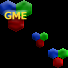
<style>
.page{position:relative;width:68px;height:68px;background:#000000}
.page>*{position:absolute;margin:0}
.t1{font:10px "Tahoma-Bold";color:#fcde39}
</style>
<div class="page">
<p class="t1" style="left:4px;top:11px;width:23px;height:9px">GME</p>
</div>
